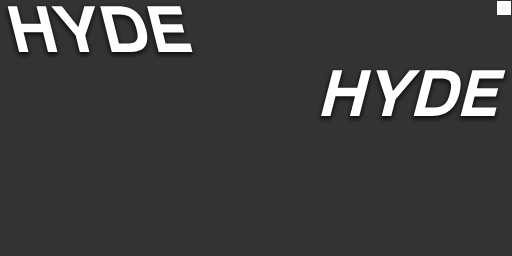
<style>
.page{position:relative;width:512px;height:256px;background:#333333}
.page>*{position:absolute;margin:0}
.t1{font:60.5px "NewCezannePro-B";letter-spacing:0.009em;color:#ffffff;scale:0.91 1}
.t2{font:60.7px "NewCezannePro-B";letter-spacing:0.009em;color:#ffffff;scale:0.91 1}
</style>
<div class="page">
<p class="t1" style="left:7px;top:6px;width:186px;height:47px">HYDE</p>
<p class="t2" style="left:321px;top:70px;width:185px;height:47px">HYDE</p>
</div>
